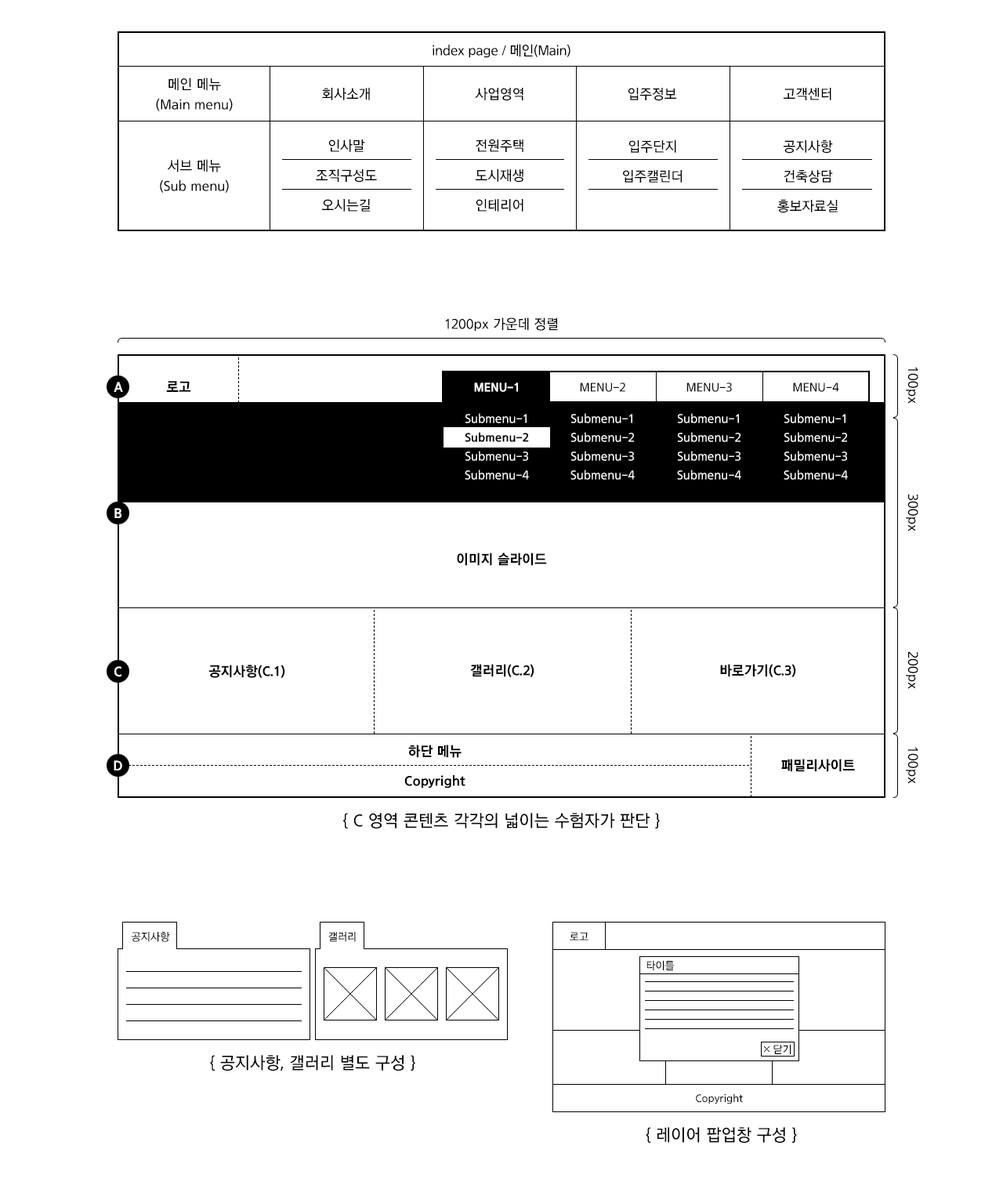
<style>
.page{position:relative;width:1003px;height:1189px;background:#ffffff}
.page>*{position:absolute;margin:0}
.t1{font:14.1px "THELuxGoM";letter-spacing:-0.025em;color:#000000;scale:0.95 1}
.t2{font:14.1px/20.4px "THELuxGoM";color:#000000;scale:0.95 1}
.t3{font:14.1px "THELuxGoM";color:#000000;scale:0.95 1}
.t4{font:14.1px/29.8px "THELuxGoM";color:#000000;scale:0.95 1}
.t5{font:14px "THELuxGoM";color:#000000;scale:0.96 1}
.t6{font:14.1px "THELuxGoEB";color:#ffffff;scale:0.95 1}
.t7{font:14.1px "THELuxGoEB";color:#000000;scale:0.95 1}
.t8{font:12.5px/18.8px "THELuxGoM";color:#ffffff;scale:0.95 1}
.t9{font:12.5px/31.3px "THELuxGoEB";color:#ffffff;scale:0.95 1}
.t10{font:12.5px/31.3px "THELuxGoM";color:#ffffff;scale:0.95 1}
.t11{font:12.5px/18.8px "THELuxGoEB";color:#000000;scale:0.95 1}
.t12{font:12.5px/31.3px "THELuxGoM";color:#000000;scale:0.95 1}
.t13{font:17.2px "THELuxGoM";color:#000000;scale:0.95 1}
.t14{font:11px "THELuxGoM";color:#000000;scale:0.95 1}
</style>
<div class="page">
<p class="t1" style="left:433px;top:44px;width:137px;height:14px">index page / 메인(Main)</p>
<p class="t2" style="left:156px;top:78px;width:77px;height:33px;text-align:center">메인 메뉴<br>(Main menu)</p>
<p class="t3" style="left:322px;top:88px;width:48px;height:12px">회사소개</p>
<p class="t3" style="left:475px;top:88px;width:48px;height:13px">사업영역</p>
<p class="t3" style="left:628px;top:88px;width:48px;height:13px">입주정보</p>
<p class="t3" style="left:784px;top:88px;width:47px;height:12px">고객센터</p>
<p class="t4" style="left:316px;top:139px;width:61px;height:73px;text-align:center">인사말<br>조직구성도<br>오시는길</p>
<p class="t4" style="left:476px;top:139px;width:47px;height:73px;text-align:center">전원주택<br>도시재생<br>인테리어</p>
<p class="t4" style="left:623px;top:140px;width:60px;height:43px;text-align:center">입주단지<br>입주캘린더</p>
<p class="t4" style="left:777px;top:140px;width:61px;height:73px;text-align:center">공지사항<br>건축상담<br>홍보자료실</p>
<p class="t2" style="left:160px;top:159px;width:69px;height:34px;text-align:center">서브 메뉴<br>(Sub menu)</p>
<p class="t3" style="left:445px;top:317px;width:113px;height:14px">1200px 가운데 정렬</p>
<p class="t5" style="left:906px;top:367px;width:12px;height:37px;rotate:90deg">100px</p>
<p class="t6" style="left:114px;top:382px;width:9px;height:10px">A</p>
<p class="t7" style="left:166px;top:381px;width:25px;height:11px">로고</p>
<p class="t8" style="left:465px;top:382px;width:64px;height:98px;text-align:center"><span class="t9">MENU-1<br></span><span class="t10">Submenu-1<br></span><span class="t11">Submenu-2<br></span>Submenu-3<br>Submenu-4</p>
<p class="t8" style="left:570px;top:382px;width:65px;height:98px;text-align:center"><span class="t12">MENU-2<br></span><span class="t10">Submenu-1<br></span>Submenu-2<br>Submenu-3<br>Submenu-4</p>
<p class="t8" style="left:677px;top:382px;width:64px;height:98px;text-align:center"><span class="t12">MENU-3<br></span><span class="t10">Submenu-1<br></span>Submenu-2<br>Submenu-3<br>Submenu-4</p>
<p class="t8" style="left:784px;top:382px;width:64px;height:98px;text-align:center"><span class="t12">MENU-4<br></span><span class="t10">Submenu-1<br></span>Submenu-2<br>Submenu-3<br>Submenu-4</p>
<p class="t5" style="left:906px;top:494px;width:12px;height:37px;rotate:90deg">300px</p>
<p class="t6" style="left:114px;top:508px;width:7px;height:10px">B</p>
<p class="t7" style="left:457px;top:552px;width:90px;height:14px">이미지 슬라이드</p>
<p class="t5" style="left:906px;top:651px;width:12px;height:38px;rotate:90deg">200px</p>
<p class="t7" style="left:208px;top:665px;width:77px;height:13px">공지사항(C.1)</p>
<p class="t7" style="left:470px;top:664px;width:64px;height:13px">갤러리(C.2)</p>
<p class="t7" style="left:720px;top:664px;width:76px;height:13px">바로가기(C.3)</p>
<p class="t6" style="left:114px;top:666px;width:7px;height:11px">C</p>
<p class="t7" style="left:408px;top:744px;width:54px;height:14px">하단 메뉴</p>
<p class="t5" style="left:906px;top:747px;width:12px;height:37px;rotate:90deg">100px</p>
<p class="t6" style="left:114px;top:760px;width:8px;height:10px">D</p>
<p class="t7" style="left:781px;top:759px;width:74px;height:13px">패밀리사이트</p>
<p class="t7" style="left:404px;top:775px;width:61px;height:13px">Copyright</p>
<p class="t13" style="left:343px;top:813px;width:317px;height:15px">{ C 영역 콘텐츠 각각의 넓이는 수험자가 판단 }</p>
<p class="t14" style="left:132px;top:932px;width:38px;height:10px">공지사항</p>
<p class="t14" style="left:328px;top:932px;width:28px;height:10px">갤러리</p>
<p class="t14" style="left:570px;top:932px;width:19px;height:8px">로고</p>
<p class="t14" style="left:647px;top:960px;width:28px;height:10px">타이틀</p>
<p class="t14" style="left:773px;top:1044px;width:18px;height:10px">닫기</p>
<p class="t13" style="left:210px;top:1055px;width:205px;height:16px">{ 공지사항, 갤러리 별도 구성 }</p>
<p class="t14" style="left:696px;top:1093px;width:47px;height:11px">Copyright</p>
<p class="t13" style="left:646px;top:1127px;width:151px;height:16px">{ 레이어 팝업창 구성 }</p>
</div>
